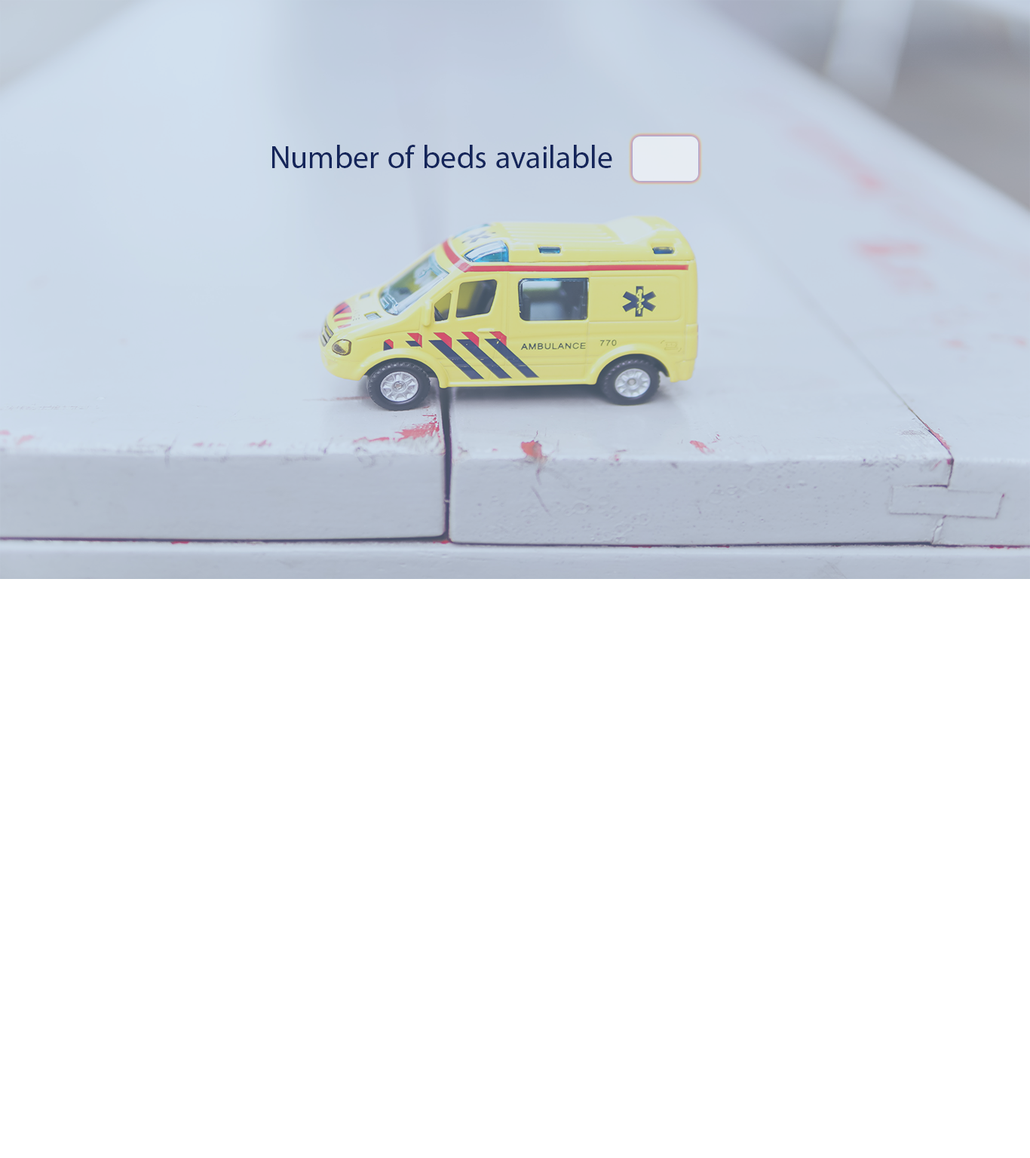
<style>
.page{position:relative;width:1030px;height:1158px;background:#ffffff}
.page>*{position:absolute;margin:0}
.t1{font:44.5px "MyriadArabic-Regular";color:#14255a}
</style>
<div class="page">
<p class="t1" style="left:272px;top:145px;width:340px;height:23px">Number of beds available</p>
</div>
